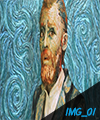
<style>
.page{position:relative;width:100px;height:120px}
.page>*{position:absolute;margin:0}
.t1{font:10px "PyunjiR-HM";letter-spacing:-0.05em;color:#0da0de;font-weight:bold}
</style>
<div class="page">
<p class="t1" style="left:65px;top:107px;width:31px;height:10px">IMG_01</p>
</div>
